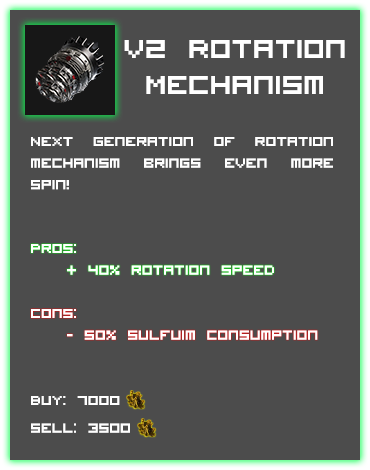
<style>
.page{position:relative;width:370px;height:470px;background:#4c4c4c}
.page>*{position:absolute;margin:0}
.t1{font:36px/12px "VisitorTT1BRK";color:#ffffff}
.t2{font:18px "VisitorTT1BRK";color:#ffffff}
</style>
<div class="page">
<p class="t1" style="left:124px;top:40px;width:221px;height:54px;text-align:center">V2 Rotation <br><br><br>Mechanism</p>
<p class="t2" style="left:31px;top:137px;width:302px;height:53px;text-align:justify">Next generation of rotation mechanism brings even more spin!</p>
<p class="t2" style="left:31px;top:244px;width:243px;height:31px;text-align:justify">Pros:<br> + 40% rotation speed</p>
<p class="t2" style="left:31px;top:309px;width:287px;height:31px;text-align:justify">Cons:<br> - 50% sulfuim Consumption</p>
<p class="t2" style="left:31px;top:396px;width:99px;height:37px">Buy: 7000    <br><br>Sell: 3500</p>
</div>
